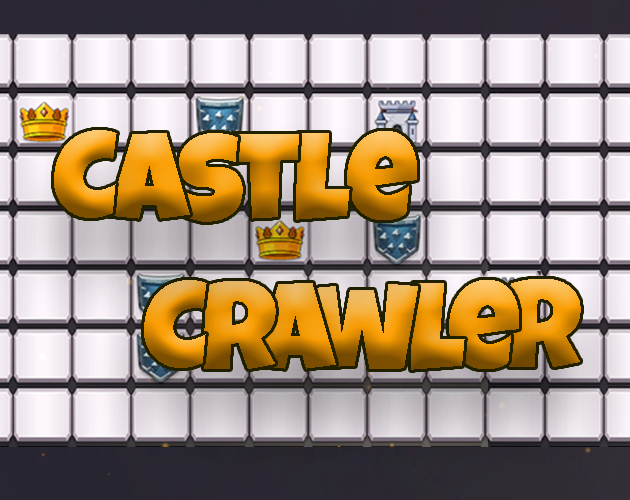
<style>
.page{position:relative;width:630px;height:500px}
.page>*{position:absolute;margin:0}
.t1{font:125px "LuckiestGuy-Regular"}
</style>
<div class="page">
<p class="t1" style="left:54px;top:130px;width:63px;height:88px">C</p>
<p class="t1" style="left:108px;top:133px;width:82px;height:86px">a</p>
<p class="t1" style="left:179px;top:133px;width:64px;height:89px">s</p>
<p class="t1" style="left:231px;top:134px;width:68px;height:85px">t</p>
<p class="t1" style="left:296px;top:133px;width:54px;height:87px">l</p>
<p class="t1" style="left:347px;top:131px;width:70px;height:89px">e</p>
<p class="t1" style="left:144px;top:280px;width:63px;height:88px">C</p>
<p class="t1" style="left:204px;top:281px;width:72px;height:88px">r</p>
<p class="t1" style="left:449px;top:280px;width:70px;height:89px">e</p>
<p class="t1" style="left:509px;top:279px;width:72px;height:88px">r</p>
<p class="t1" style="left:305px;top:284px;width:113px;height:85px">w</p>
</div>
